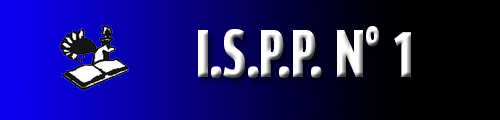
<style>
.page{position:relative;width:500px;height:120px}
.page>*{position:absolute;margin:0}
.t1{font:63.8px "AkweProCon-Bold";scale:0.94 1}
</style>
<div class="page">
<p class="t1" style="left:198px;top:26px;width:213px;height:52px">I.S.P.P. N° 1</p>
</div>
